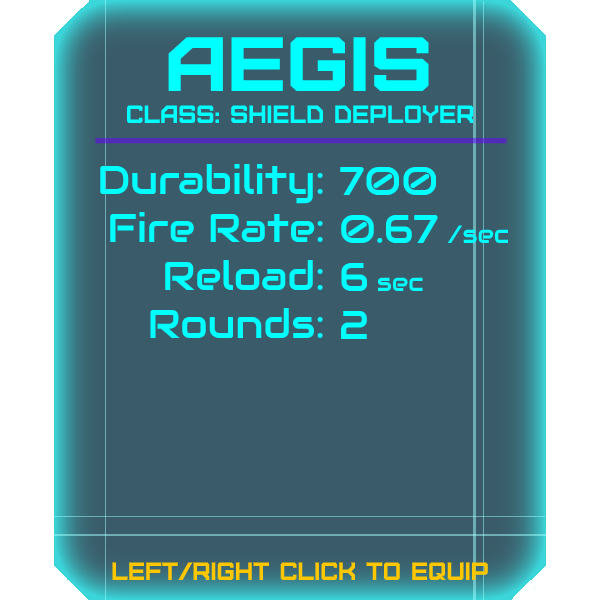
<style>
.page{position:relative;width:600px;height:600px;background:#3a5c6a}
.page>*{position:absolute;margin:0}
.t1{font:76.8px "Furore";color:#00ffff;scale:1.13 1}
.t2{font:25px "Furore";color:#00ffff}
.t3{font:40px "Audiowide-Regular";color:#00ffff}
.t4{font:25px "Audiowide-Regular";color:#00ffff}
.t5{font:25px "Furore";color:#ffc700}
</style>
<div class="page">
<p class="t1" style="left:168px;top:37px;width:261px;height:54px">Aegis</p>
<p class="t2" style="left:126px;top:105px;width:348px;height:18px">Class: Shield Deployer</p>
<p class="t3" style="left:100px;top:163px;width:223px;height:175px;text-align:right">Durability:<br>Fire Rate:<br>Reload:<br>Rounds:</p>
<p class="t3" style="left:340px;top:166px;width:169px;height:173px">700<br>0.67 <span class="t4">/sec<br></span>6 <span class="t4">sec<br></span>2</p>
<p class="t5" style="left:112px;top:562px;width:376px;height:18px">left/right click to equip</p>
</div>
